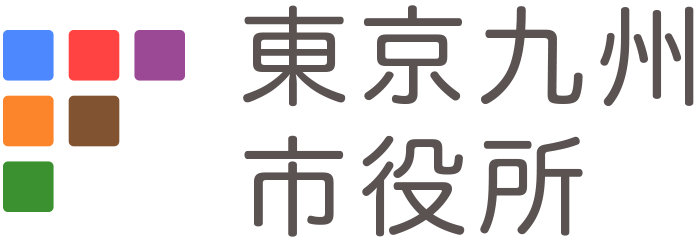
<style>
.page{position:relative;width:700px;height:250px;background:#ffffff}
.page>*{position:absolute;margin:0}
.t1{font:108px "HiraMaruPro-W4";letter-spacing:0.1em;color:#5b5252}
</style>
<div class="page">
<p class="t1" style="left:243px;top:5px;width:451px;height:232px">東京九州<br>市役所</p>
</div>
